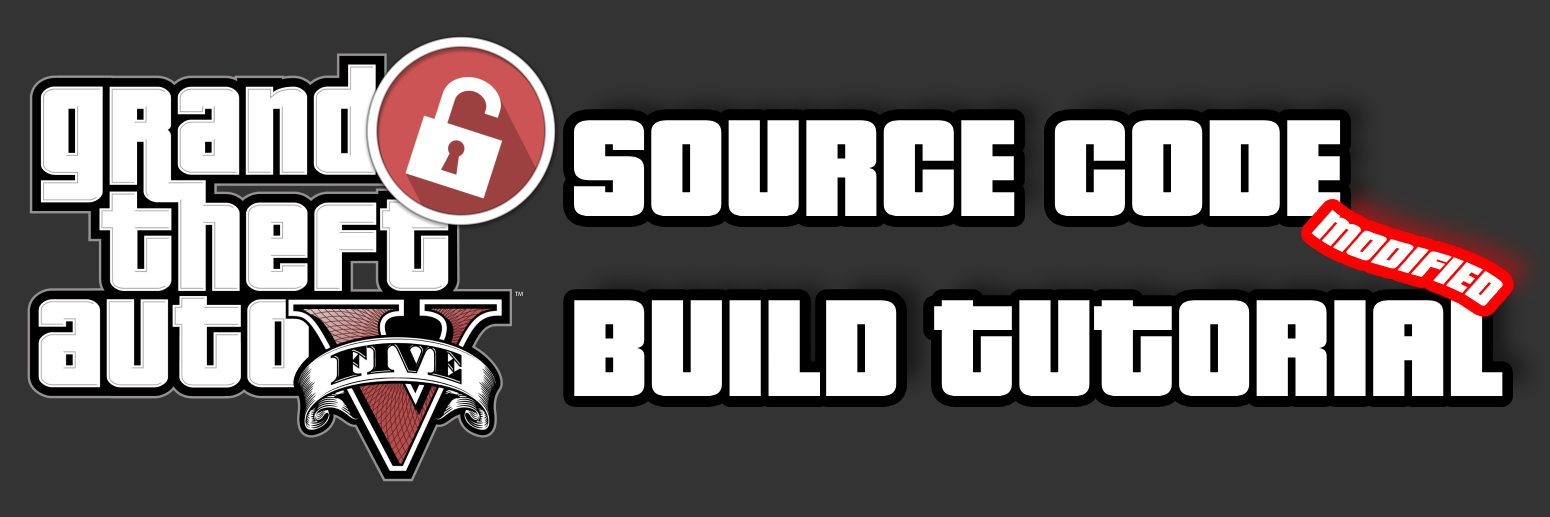
<style>
.page{position:relative;width:1550px;height:517px;background:#333333}
.page>*{position:absolute;margin:0}
.t1{font:150px "PricedownBl-Regular";color:#ffffff}
.t2{font:49px "PricedownBl-Regular";color:#ffffff}
</style>
<div class="page">
<p class="t1" style="left:574px;top:120px;width:929px;height:276px">SOURCE CODE <br>BUILD TUTORIAL</p>
<p class="t2" style="left:1311px;top:209px;width:193px;height:98px;rotate:42deg">MODIFIED</p>
</div>
